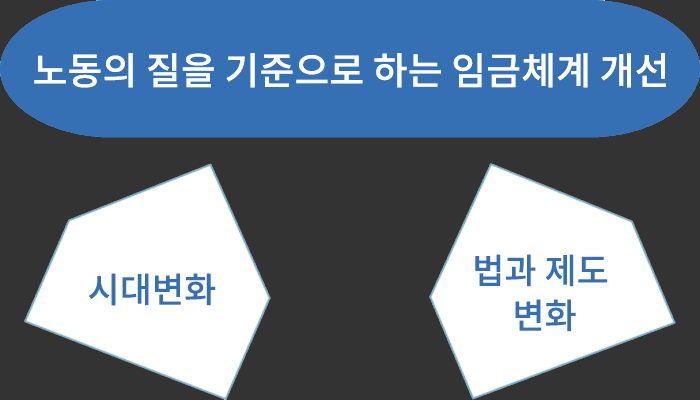
<style>
.page{position:relative;width:700px;height:400px;background:#333333}
.page>*{position:absolute;margin:0}
.t1{font:38px "NotoSansCJKkr-Medium";color:#ffffff}
.t2{font:35px/45px "NotoSansCJKkr-Medium";color:#3570b4}
.t3{font:35px "NotoSansCJKkr-Medium";color:#3570b4}
</style>
<div class="page">
<p class="t1" style="left:34px;top:53px;width:632px;height:35px">노동의 질을 기준으로 하는임금체계 개선</p>
<p class="t2" style="left:475px;top:254px;width:133px;height:78px;text-align:center">법과 제도 <br>변화</p>
<p class="t3" style="left:89px;top:273px;width:127px;height:33px">시대변화</p>
</div>
